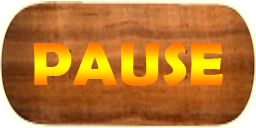
<style>
.page{position:relative;width:256px;height:128px}
.page>*{position:absolute;margin:0}
.t1{font:62.2px "BerlinSansFBDemi-Bold";scale:1.04 1}
</style>
<div class="page">
<p class="t1" style="left:33px;top:42px;width:190px;height:44px">PAUSE</p>
</div>
